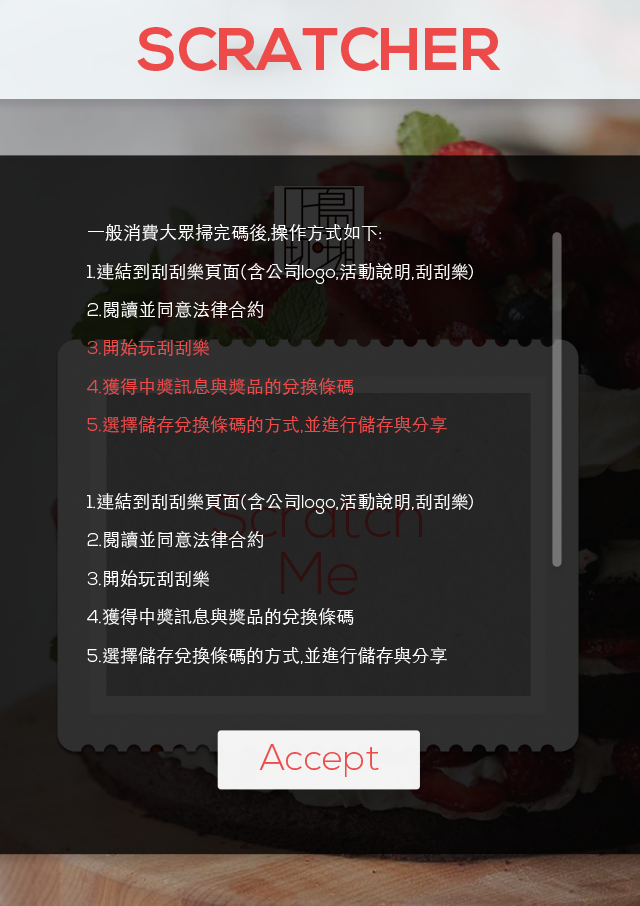
<style>
.page{position:relative;width:640px;height:906px}
.page>*{position:absolute;margin:0}
.t1{font:60px "NexaBold";color:#ed4a4a}
.t2{font:18px/38.4px "STHeitiTC-Light";color:#ed4a4a}
.t3{font:18px/38.4px "STHeitiTC-Light";color:#ffffff}
.t4{font:18px/38.4px "NexaLight";color:#ffffff}
.t5{font:18px/38.4px "NexaLight";color:#ed4a4a}
.t6{font:36px "NexaLight";color:#ed4a4a}
</style>
<div class="page">
<p class="t1" style="left:137px;top:27px;width:363px;height:44px">SCRATCHER</p>
<p class="t2" style="left:87px;top:224px;width:386px;height:441px"><span class="t3">一般消費大眾掃完碼後</span><span class="t4">,</span><span class="t3">操作方式如下</span><span class="t4">:<br>1.</span><span class="t3">連結到刮刮樂頁面</span><span class="t4">(</span><span class="t3">含公司</span><span class="t4">logo,</span><span class="t3">活動說明</span><span class="t4">,</span><span class="t3">刮刮樂</span><span class="t4">)<br>2.</span><span class="t3">閱讀並同意法律合約<br></span><span class="t5">3.</span>開始玩刮刮樂<br><span class="t5">4.</span>獲得中獎訊息與獎品的兌換條碼<br><span class="t5">5.</span>選擇儲存兌換條碼的方式<span class="t5">,</span>並進行儲存與分享<br><br><span class="t4">1.</span><span class="t3">連結到刮刮樂頁面</span><span class="t4">(</span><span class="t3">含公司</span><span class="t4">logo,</span><span class="t3">活動說明</span><span class="t4">,</span><span class="t3">刮刮樂</span><span class="t4">)<br>2.</span><span class="t3">閱讀並同意法律合約<br></span><span class="t4">3.</span><span class="t3">開始玩刮刮樂<br></span><span class="t4">4.</span><span class="t3">獲得中獎訊息與獎品的兌換條碼<br></span><span class="t4">5.</span><span class="t3">選擇儲存兌換條碼的方式</span><span class="t4">,</span><span class="t3">並進行儲存與分享</span></p>
<p class="t6" style="left:259px;top:744px;width:120px;height:33px">Accept</p>
</div>
